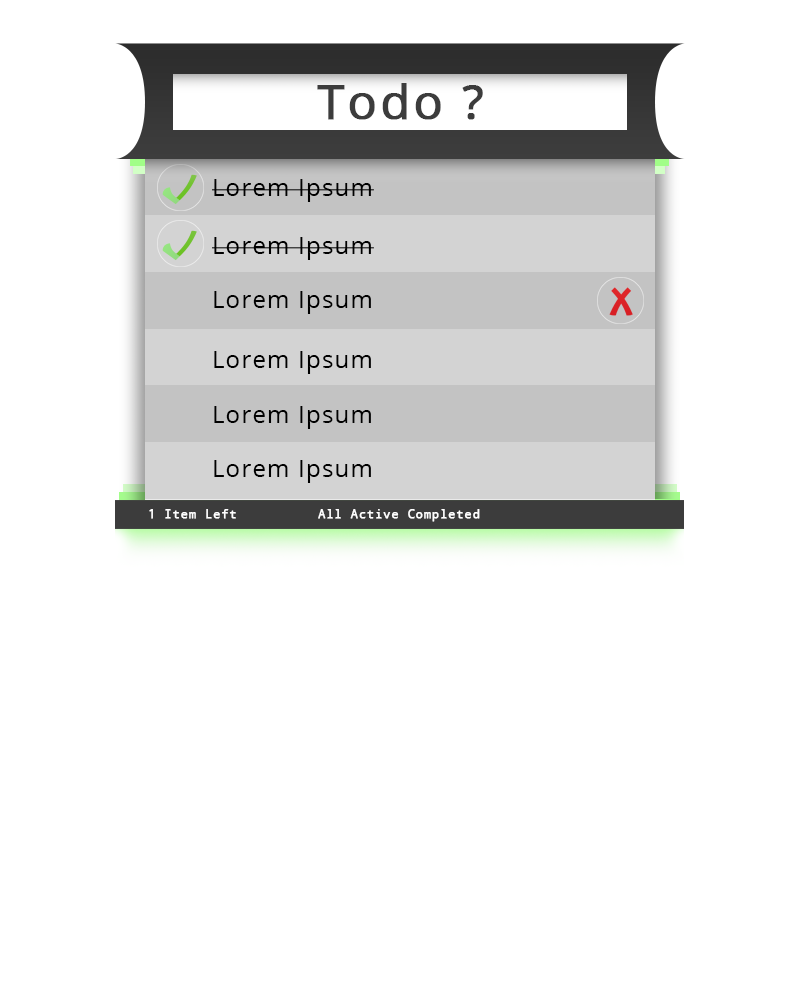
<style>
.page{position:relative;width:800px;height:1000px;background:#ffffff}
.page>*{position:absolute;margin:0}
.t1{font:48px "OpenSans";letter-spacing:0.05em;color:#3c3c3c;font-weight:bold}
.t2{font:24px "OpenSans";letter-spacing:0.05em;color:#000000}
.t3{font:12px "DroidSansMonoDottedForPowerline";letter-spacing:0.05em;color:#ffffff;font-weight:bold}
.t4{font:12px "DroidSansMonoDottedForPowerline";letter-spacing:0.05em;color:#ffffff;text-transform:uppercase;font-weight:bold}
</style>
<div class="page">
<p class="t1" style="left:317px;top:83px;width:166px;height:37px">Todo ?</p>
<p class="t2" style="left:212px;top:179px;width:162px;height:23px">Lorem Ipsum</p>
<p class="t2" style="left:212px;top:237px;width:162px;height:23px">Lorem Ipsum</p>
<p class="t2" style="left:214px;top:291px;width:157px;height:23px">Lorem Ipsum</p>
<p class="t2" style="left:214px;top:351px;width:157px;height:23px">Lorem Ipsum</p>
<p class="t2" style="left:214px;top:406px;width:157px;height:23px">Lorem Ipsum</p>
<p class="t2" style="left:214px;top:460px;width:157px;height:23px">Lorem Ipsum</p>
<p class="t3" style="left:149px;top:509px;width:87px;height:10px"><span class="t4">1 </span>Item Left</p>
<p class="t3" style="left:318px;top:509px;width:162px;height:13px">All Active Completed</p>
</div>
